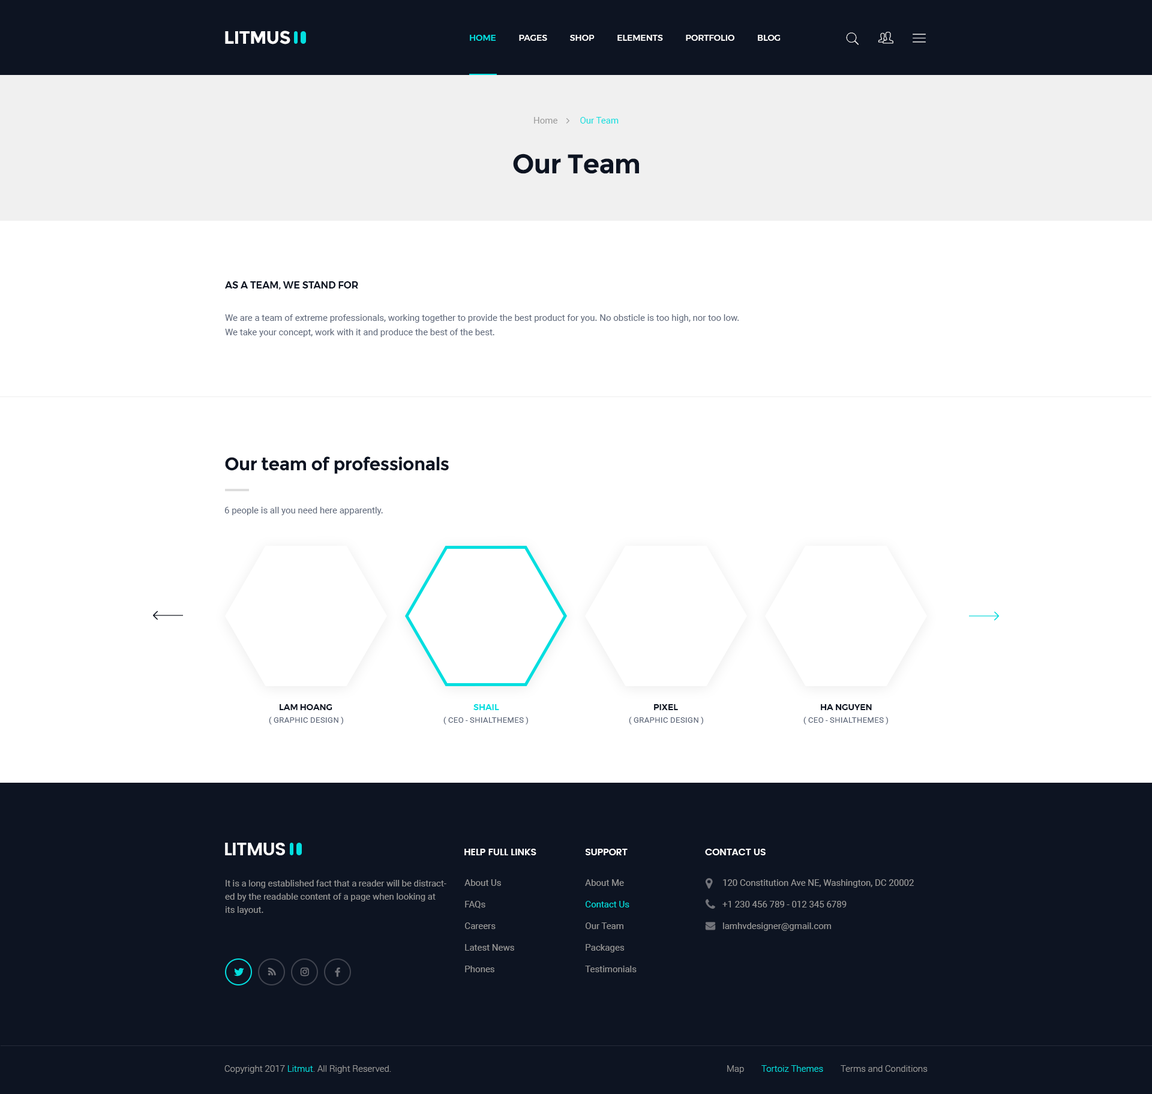
<style>
.page{position:relative;width:1152px;height:1094px;background:#ffffff}
.page>*{position:absolute;margin:0}
.t1{font:18px "Montserrat-Bold";letter-spacing:-0.025em;color:#ffffff;text-transform:uppercase}
.t2{font:8.4px "Montserrat-Medium";color:#ffffff;text-transform:uppercase}
.t3{font:8.4px "Montserrat-Medium";color:#03dedf;text-transform:uppercase}
.t4{font:9px "Roboto-Regular";color:#03dedf}
.t5{font:9px "Roboto-Regular";color:#999999}
.t6{font:27px "Montserrat-Bold";letter-spacing:-0.025em;color:#0d1422}
.t7{font:9.6px "Montserrat-SemiBold";color:#0d1422}
.t8{font:9px/14.4px "Roboto-Regular";color:#5b6578}
.t9{font:18px "Montserrat-Bold";letter-spacing:-0.025em;color:#0d1422}
.t10{font:9px "Roboto-Regular";color:#5b6578}
.t11{font:8.4px "Montserrat-SemiBold";color:#0d1422;text-transform:uppercase}
.t12{font:8.4px "Montserrat-SemiBold";color:#03dedf;text-transform:uppercase}
.t13{font:7.8px "Roboto-Regular";color:#5b6578;text-transform:uppercase}
.t14{font:18px "Poppins-SemiBold";letter-spacing:-0.025em;color:#ffffff;text-transform:uppercase}
.t15{font:9.6px "Poppins-SemiBold";letter-spacing:-0.025em;color:#ffffff;text-transform:uppercase}
.t16{font:9px/13.2px "Roboto-Regular";color:#999999}
.t17{font:9px/21.6px "Roboto-Regular";color:#999999}
.t18{font:9px/21.6px "Roboto-Regular";color:#03dedf}
.t19{font:9px "Roboto-Light";color:#999999}
.t20{font:9px "Roboto-Light";color:#03dedf}
</style>
<div class="page">
<p class="t1" style="left:225px;top:31px;width:65px;height:13px">Litmus</p>
<p class="t2" style="left:470px;top:35px;width:311px;height:6px"><span class="t3">HOME</span>           PAGES           SHOP           ELEMENTS           PORTFOLIO           BLOG</p>
<p class="t4" style="left:534px;top:117px;width:85px;height:7px"><span class="t5">Home          </span>Our Team</p>
<p class="t6" style="left:513px;top:154px;width:126px;height:20px">Our Team</p>
<p class="t7" style="left:225px;top:281px;width:133px;height:9px">AS A TEAM, WE STAND FOR</p>
<p class="t8" style="left:225px;top:314px;width:514px;height:23px">We are a team of extreme professionals, working together to provide the best product for you. No obsticle is too high, nor too low.<br>We take your concept, work with it and produce the best of the best.</p>
<p class="t9" style="left:225px;top:457px;width:224px;height:17px">Our team of professionals</p>
<p class="t10" style="left:224px;top:507px;width:159px;height:8px">6 people is all you need here apparently.</p>
<p class="t11" style="left:280px;top:704px;width:52px;height:6px">Lam Hoang</p>
<p class="t12" style="left:473px;top:704px;width:26px;height:6px">Shail</p>
<p class="t11" style="left:654px;top:704px;width:24px;height:6px">Pixel</p>
<p class="t11" style="left:821px;top:704px;width:51px;height:6px">Ha Nguyen</p>
<p class="t13" style="left:269px;top:717px;width:74px;height:8px">( Graphic Design )</p>
<p class="t13" style="left:443px;top:717px;width:85px;height:8px">( CEO - ShialThemes )</p>
<p class="t13" style="left:629px;top:717px;width:74px;height:8px">( Graphic Design )</p>
<p class="t13" style="left:803px;top:717px;width:85px;height:8px">( CEO - ShialThemes )</p>
<p class="t14" style="left:225px;top:843px;width:60px;height:13px">Litmus</p>
<p class="t15" style="left:464px;top:849px;width:72px;height:7px">Help full links</p>
<p class="t15" style="left:586px;top:849px;width:42px;height:7px">Support</p>
<p class="t15" style="left:705px;top:849px;width:61px;height:7px">Contact Us</p>
<p class="t16" style="left:225px;top:880px;width:221px;height:35px">It is a long established fact that a reader will be distracted by the readable content of a page when looking at its layout.</p>
<p class="t17" style="left:464px;top:880px;width:50px;height:93px">About Us<br>FAQs<br>Careers<br>Latest News<br>Phones</p>
<p class="t17" style="left:585px;top:880px;width:52px;height:93px">About Me<br><span class="t18">Contact Us<br></span>Our Team<br>Packages<br>Testimonials</p>
<p class="t17" style="left:722px;top:880px;width:192px;height:51px">120 Constitution Ave NE, Washington, DC 20002<br>+1 230 456 789 - 012 345 6789<br>lamhvdesigner@gmail.com</p>
<p class="t19" style="left:224px;top:1066px;width:167px;height:8px">Copyright 2017 <span class="t20">Litmut</span>. All Right Reserved.</p>
<p class="t19" style="left:727px;top:1066px;width:17px;height:8px">Map</p>
<p class="t20" style="left:761px;top:1066px;width:62px;height:6px">Tortoiz Themes</p>
<p class="t19" style="left:841px;top:1066px;width:87px;height:6px">Terms and Conditions</p>
</div>
